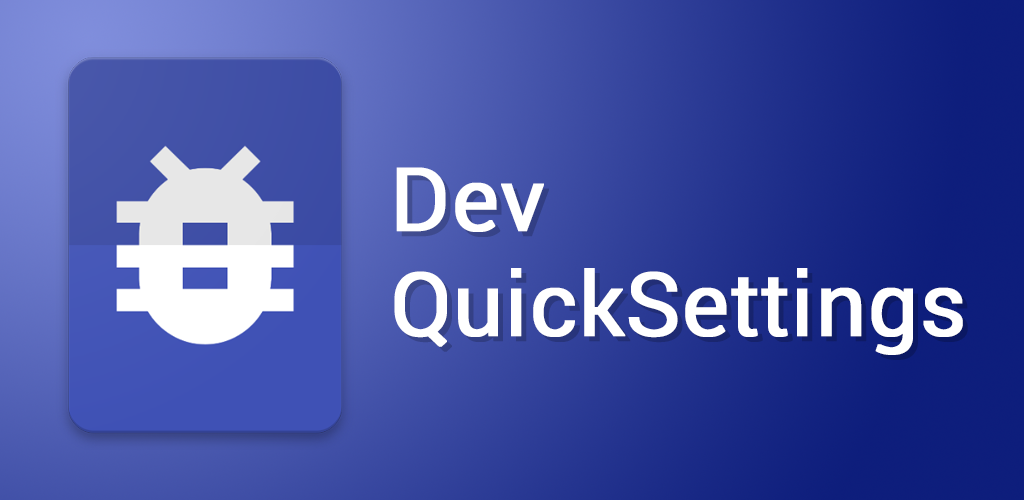
<style>
.page{position:relative;width:1024px;height:500px}
.page>*{position:absolute;margin:0}
.t1{font:88px "Roboto-Regular";color:#ffffff;font-weight:bold}
</style>
<div class="page">
<p class="t1" style="left:394px;top:167px;width:569px;height:188px">Dev<br>QuickSettings</p>
</div>
